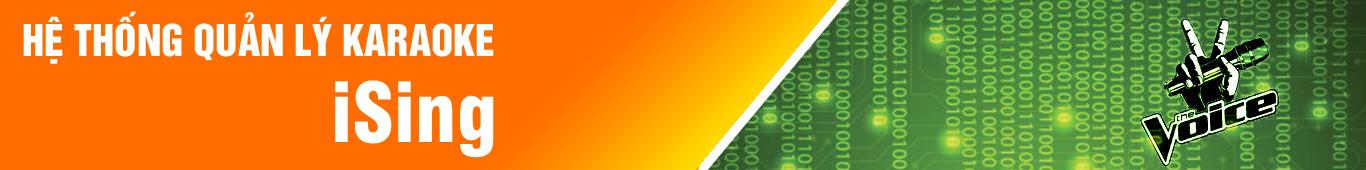
<style>
.page{position:relative;width:1366px;height:170px;background:#ff6d00}
.page>*{position:absolute;margin:0}
.t1{font:40px "UTM-HelvetIns";color:#feffff}
.t2{font:80px "UTM-Swiss-721-Black-Condensed";color:#feffff}
</style>
<div class="page">
<p class="t1" style="left:23px;top:11px;width:471px;height:53px">HỆ THỐNG QUẢN LÝ KARAOKE</p>
<p class="t2" style="left:335px;top:80px;width:159px;height:78px">iSing</p>
</div>
